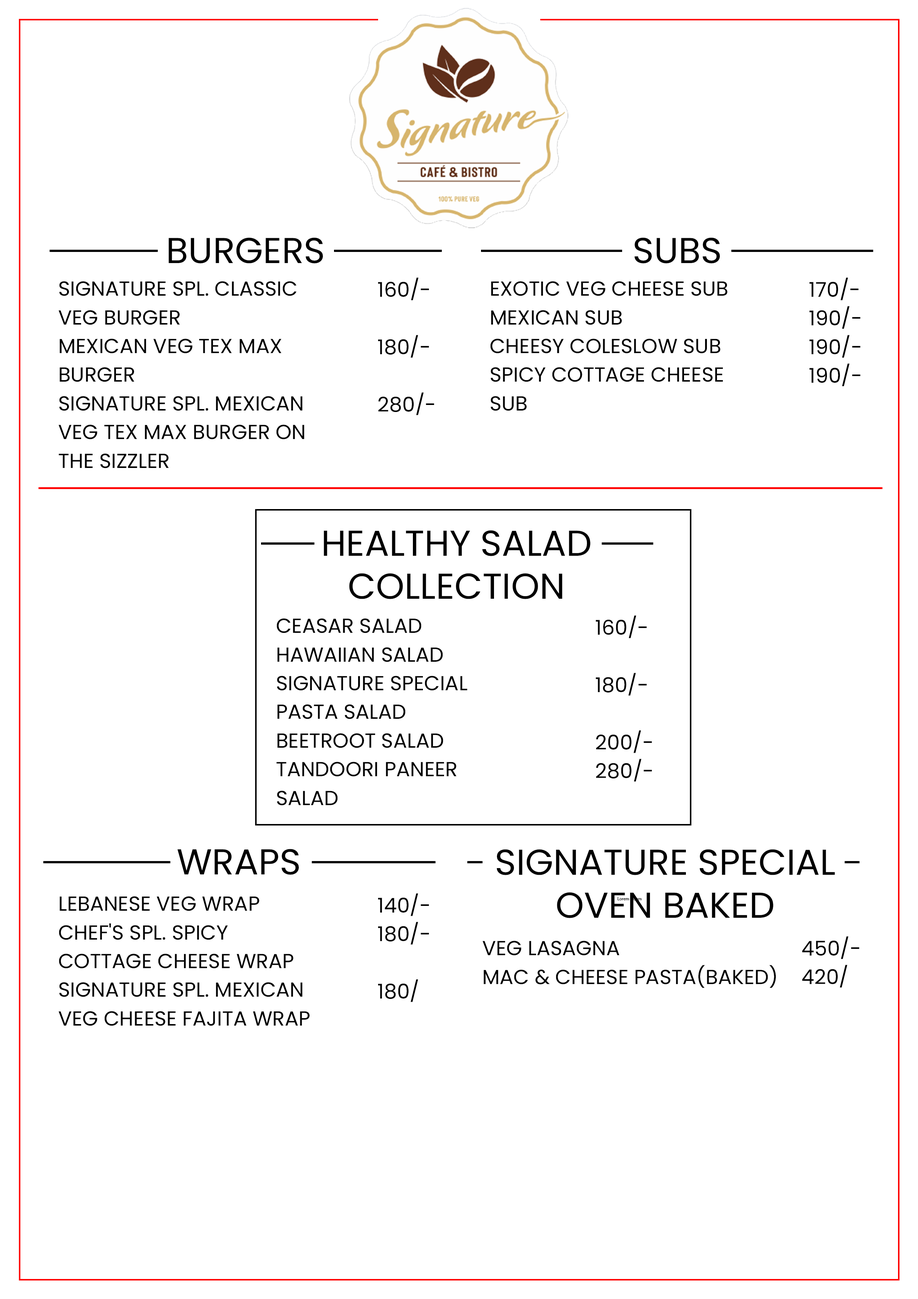
<style>
.page{position:relative;width:918px;height:1299px;background:#ffffff}
.page>*{position:absolute;margin:0}
.t1{font:35.9px "Poppins-Regular";color:#000000;text-transform:uppercase}
.t2{font:20.4px/28.7px "Poppins-Regular";color:#000000}
.t3{font:4.4px "MyriadPro-Regular";color:#000000}
</style>
<div class="page">
<p class="t1" style="left:169px;top:237px;width:154px;height:26px">BURGERS</p>
<p class="t1" style="left:634px;top:237px;width:86px;height:26px">SUBS</p>
<p class="t2" style="left:59px;top:281px;width:245px;height:187px">SIGNATURE SPL. CLASSIC<br>VEG BURGER<br>MEXICAN VEG TEX MAX<br>BURGER<br>SIGNATURE SPL. MEXICAN<br>VEG TEX MAX BURGER ON<br>THE SIZZLER</p>
<p class="t2" style="left:378px;top:277px;width:56px;height:138px">160/-<br><br>180/-<br><br>280/-</p>
<p class="t2" style="left:490px;top:281px;width:237px;height:130px">EXOTIC VEG CHEESE SUB<br>MEXICAN SUB<br>CHEESY COLESLOW SUB<br>SPICY COTTAGE CHEESE<br>SUB</p>
<p class="t2" style="left:810px;top:277px;width:51px;height:109px">170/-<br>190/-<br>190/-<br>190/-</p>
<p class="t1" style="left:324px;top:530px;width:266px;height:69px;text-align:center">HEALTHY SALAD<br>COLLECTION</p>
<p class="t2" style="left:596px;top:615px;width:56px;height:167px">160/-<br><br>180/-<br><br>200/-<br>280/-</p>
<p class="t2" style="left:276px;top:618px;width:191px;height:187px">CEASAR SALAD<br>HAWAIIAN SALAD<br>SIGNATURE SPECIAL<br>PASTA SALAD<br>BEETROOT SALAD<br>TANDOORI PANEER<br>SALAD</p>
<p class="t1" style="left:177px;top:849px;width:122px;height:26px">WRAPS</p>
<p class="t1" style="left:497px;top:849px;width:338px;height:69px;text-align:center">SIGNATURE SPECIAL<br>OVEN BAKED</p>
<p class="t2" style="left:378px;top:893px;width:51px;height:109px">140/-<br>180/-<br><br>180/</p>
<p class="t2" style="left:59px;top:896px;width:251px;height:130px">LEBANESE VEG WRAP<br>CHEF'S SPL. SPICY<br>COTTAGE CHEESE WRAP<br>SIGNATURE SPL. MEXICAN<br>VEG CHEESE FAJITA WRAP</p>
<p class="t3" style="left:618px;top:897px;width:24px;height:4px">Lorem Ipsum</p>
<p class="t2" style="left:483px;top:940px;width:293px;height:48px">VEG LASAGNA<br>MAC &amp; CHEESE PASTA(BAKED)</p>
<p class="t2" style="left:802px;top:936px;width:58px;height:51px">450/-<br>420/</p>
</div>
